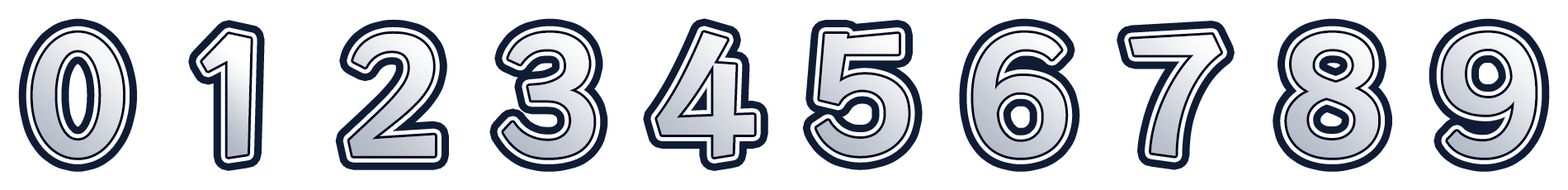
<style>
.page{position:relative;width:1568px;height:190px;background:#ffffff}
.page>*{position:absolute;margin:0}
.t1{font:151.3px "RocknRollOne-Regular";font-weight:bold}
.t2{font:151.3px "RocknRollOne-Regular";color:#d6dae0;font-weight:bold}
</style>
<div class="page">
<p class="t1" style="left:32px;top:32px;width:91px;height:126px">0</p>
<p class="t1" style="left:202px;top:34px;width:49px;height:123px">1</p>
<p class="t1" style="left:349px;top:33px;width:86px;height:123px">2</p>
<p class="t1" style="left:503px;top:32px;width:91px;height:126px">3</p>
<p class="t2" style="left:657px;top:32px;width:97px;height:125px">4</p>
<p class="t1" style="left:816px;top:34px;width:93px;height:122px">5</p>
<p class="t1" style="left:973px;top:32px;width:93px;height:126px">6</p>
<p class="t1" style="left:1287px;top:32px;width:91px;height:126px">8</p>
<p class="t1" style="left:1443px;top:32px;width:93px;height:126px">9</p>
</div>
